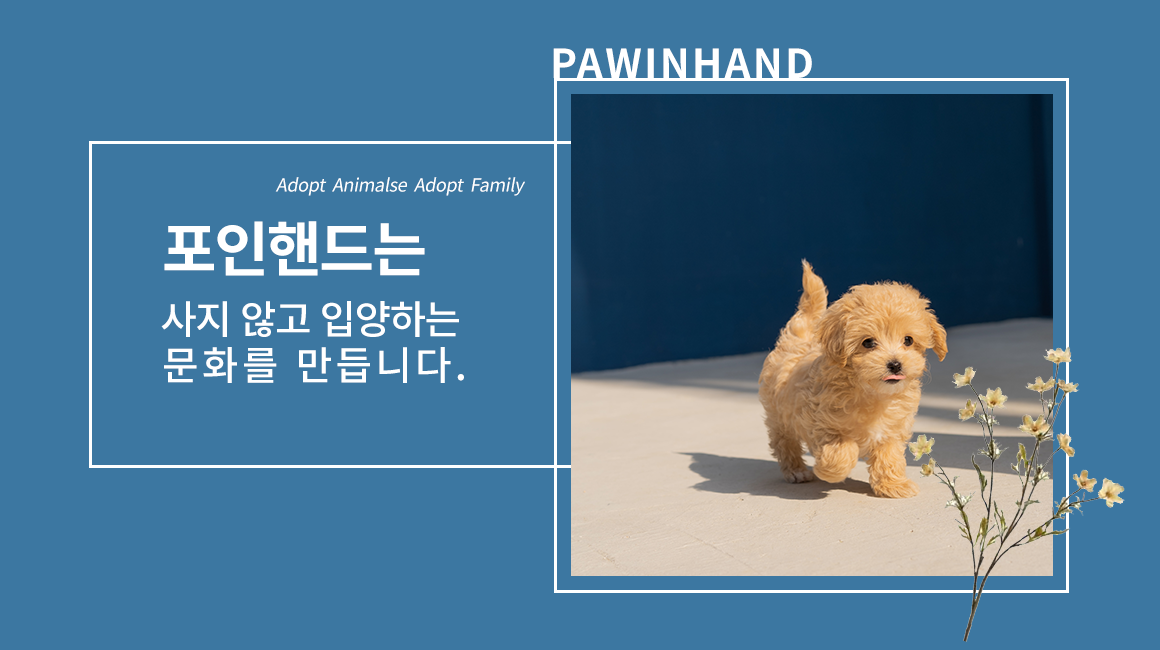
<style>
.page{position:relative;width:1160px;height:650px;background:#3c77a1}
.page>*{position:absolute;margin:0}
.t1{font:40px "NotoSansKR-Bold";letter-spacing:0.06em;color:#ffffff}
.t2{font:18px "NotoSansKR-Regular";letter-spacing:-0.02em;color:#ffffff;font-style:italic}
.t3{font:59.7px "NotoSansKR-Bold";letter-spacing:-0.04em;color:#ffffff}
.t4{font:39.8px/46px "NotoSansKR-Medium";letter-spacing:-0.04em;color:#ffffff}
.t5{font:39.8px/46px "NotoSansKR-Medium";letter-spacing:0.08em;color:#ffffff}
</style>
<div class="page">
<p class="t1" style="left:553px;top:48px;width:259px;height:30px">PAWINHAND</p>
<p class="t2" style="left:275px;top:177px;width:250px;height:19px">Adopt  Animalse  Adopt  Family</p>
<p class="t3" style="left:164px;top:221px;width:261px;height:55px">포인핸드는</p>
<p class="t4" style="left:161px;top:301px;width:303px;height:82px;text-align:center">사지 않고 입양하는 <br><span class="t5">문화를 만듭니다.</span></p>
</div>
